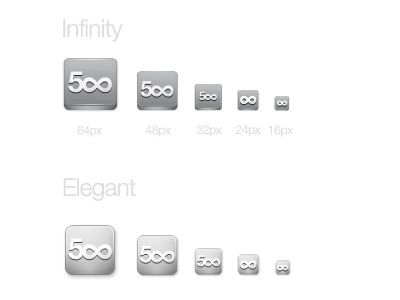
<style>
.page{position:relative;width:400px;height:300px;background:#ffffff}
.page>*{position:absolute;margin:0}
.t1{font:24.3px "HelveticaNeue-Light";letter-spacing:-0.025em;color:#dddddd}
.t2{font:12px "HelveticaNeue-Light";letter-spacing:-0.025em;color:#dddddd}
</style>
<div class="page">
<p class="t1" style="left:63px;top:19px;width:60px;height:23px">Infinity</p>
<p class="t2" style="left:77px;top:125px;width:26px;height:12px">64px</p>
<p class="t2" style="left:145px;top:125px;width:26px;height:12px">48px</p>
<p class="t2" style="left:196px;top:125px;width:26px;height:12px">32px</p>
<p class="t2" style="left:235px;top:125px;width:26px;height:12px">24px</p>
<p class="t2" style="left:268px;top:125px;width:25px;height:12px">16px</p>
<p class="t1" style="left:63px;top:178px;width:73px;height:23px">Elegant</p>
</div>
